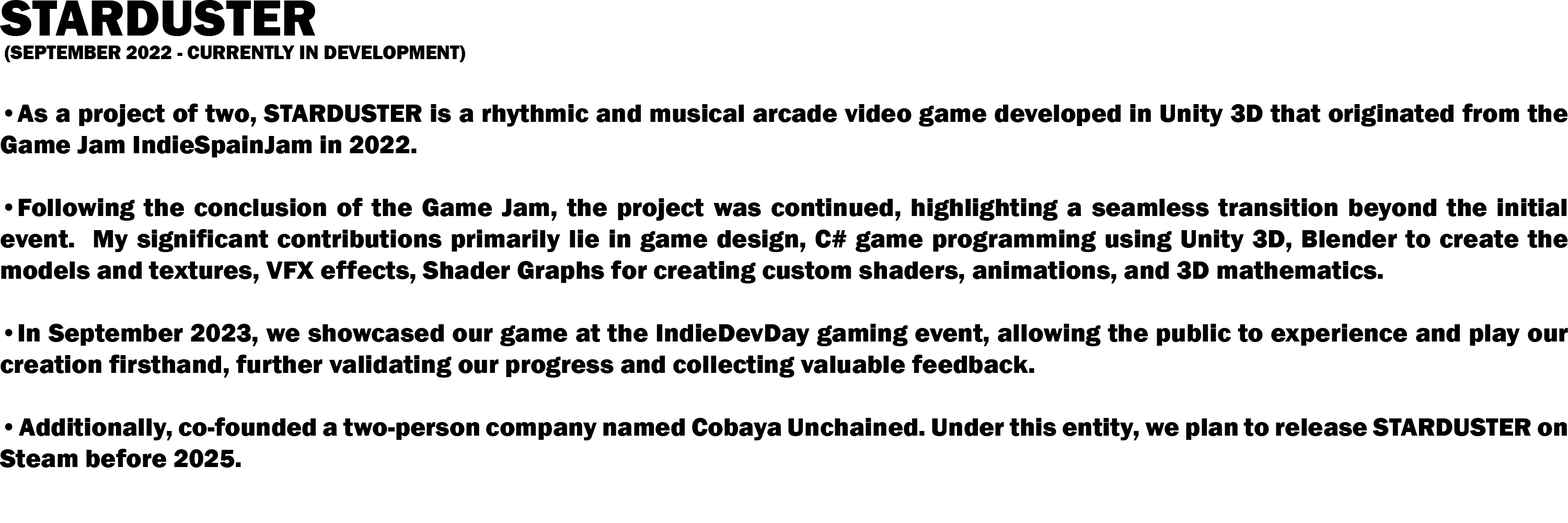
<style>
.page{position:relative;width:1568px;height:523px;background:#ffffff}
.page>*{position:absolute;margin:0}
.t1{font:26.1px "FranklinGothic-Heavy";color:#000000}
.t2{font:52.3px "FranklinGothic-Heavy";color:#000000}
.t3{font:19.6px "FranklinGothic-Heavy";color:#000000}
</style>
<div class="page">
<p class="t1" style="left:0px;top:0px;width:1568px;height:467px"><span class="t2">STARDUSTER<br></span><span class="t3"> (SEPTEMBER 2022 - CURRENTLY IN DEVELOPMENT)<br></span><br>•As a project of two, STARDUSTER is a rhythmic and musical arcade video game developed in Unity 3D that originated from the Game Jam IndieSpainJam in 2022.<br><br>•Following the conclusion of the Game Jam, the project was continued, highlighting a seamless transition beyond the initial event.  My significant contributions primarily lie in game design, C# game programming using Unity 3D, Blender to create the models and textures, VFX effects, Shader Graphs for creating custom shaders, animations, and 3D mathematics.<br><br>•In September 2023, we showcased our game at the IndieDevDay gaming event, allowing the public to experience and play our creation firsthand, further validating our progress and collecting valuable feedback.<br><br>• Additionally, co-founded a two-person company named Cobaya Unchained. Under this entity, we plan to release STARDUSTER on Steam before 2025.</p>
</div>
